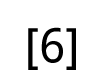
<style>
.page{position:relative;width:105px;height:83px;background:#ffffff}
.page>*{position:absolute;margin:0}
.t1{font:47.9px "DroidSans";color:#000000}
</style>
<div class="page">
<p class="t1" style="left:28px;top:27px;width:48px;height:43px">[6]</p>
</div>
